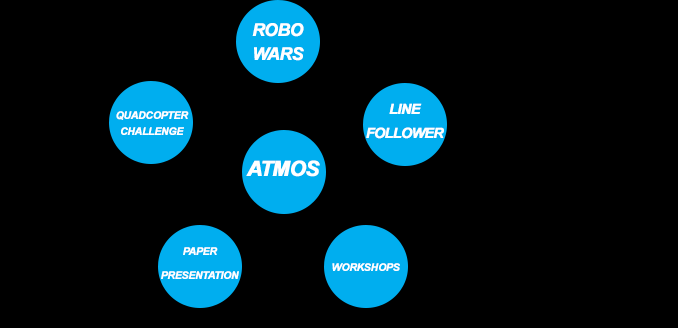
<style>
.page{position:relative;width:678px;height:328px;background:#000000}
.page>*{position:absolute;margin:0}
.t1{font:30px/24px "Arial-BoldItalicMT";letter-spacing:-0.05em;color:#ffffff;font-weight:bold}
.t2{font:18px/16px "Arial-BoldItalicMT";letter-spacing:-0.05em;color:#ffffff;font-weight:bold}
.t3{font:24px/24px "Arial-BoldItalicMT";letter-spacing:-0.05em;color:#ffffff;font-weight:bold}
.t4{font:36px "Arial-BoldItalicMT";letter-spacing:-0.05em;color:#ffffff;font-weight:bold}
.t5{font:18px/24px "Arial-BoldItalicMT";letter-spacing:-0.05em;color:#ffffff;font-weight:bold}
.t6{font:18px "Arial-BoldItalicMT";letter-spacing:-0.05em;color:#ffffff;font-weight:bold}
</style>
<div class="page">
<p class="t1" style="left:252px;top:23px;width:52px;height:38px;text-align:center">ROBO<br>WARS</p>
<p class="t2" style="left:116px;top:111px;width:73px;height:24px;text-align:center">QUADCOPTER<br>CHALLENGE</p>
<p class="t3" style="left:366px;top:103px;width:78px;height:36px;text-align:center">LINE<br>FOLLOWER</p>
<p class="t4" style="left:246px;top:160px;width:74px;height:17px">ATMOS</p>
<p class="t5" style="left:161px;top:247px;width:78px;height:32px;text-align:center">PAPER<br>PRESENTATION</p>
<p class="t6" style="left:332px;top:263px;width:68px;height:8px">WORKSHOPS</p>
</div>
